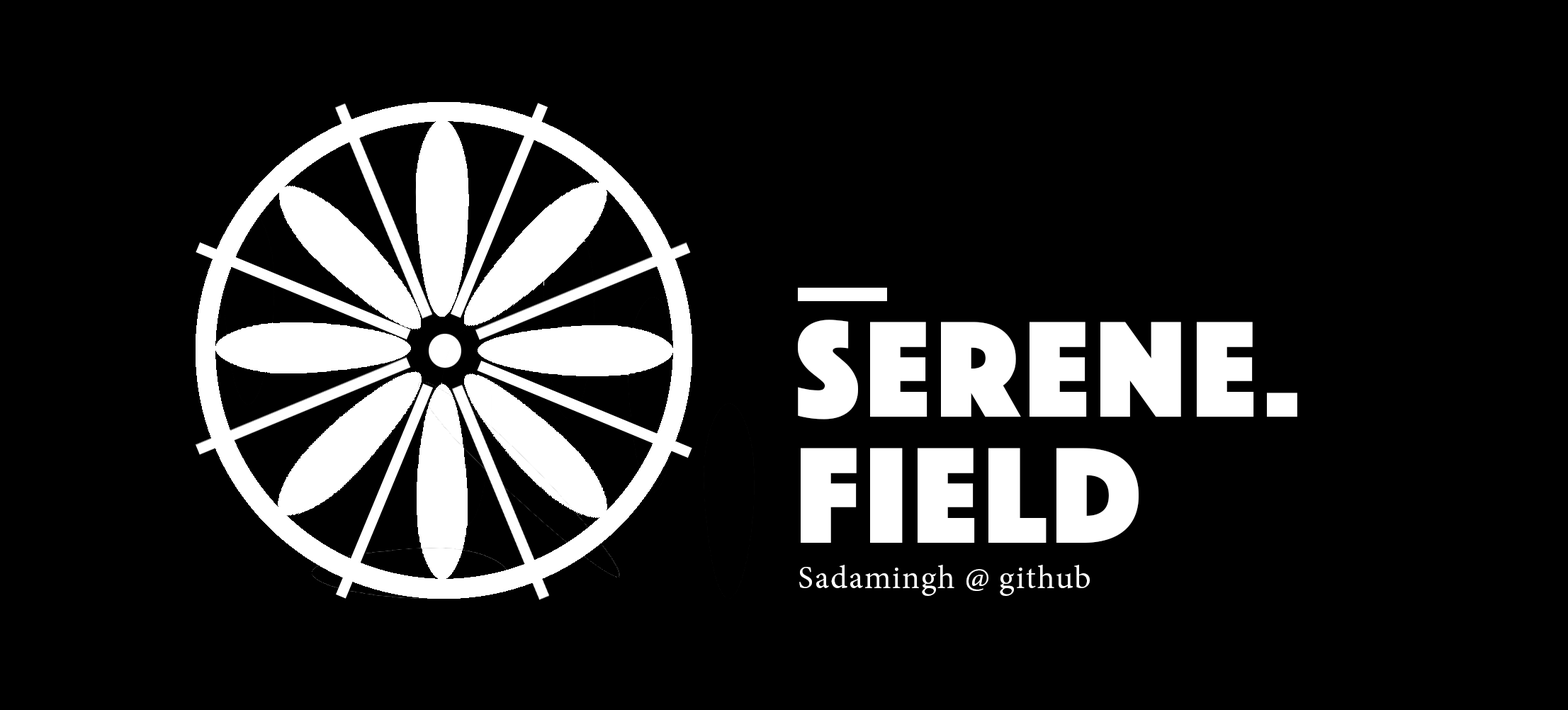
<style>
.page{position:relative;width:1568px;height:710px;background:#000000}
.page>*{position:absolute;margin:0}
.t1{font:141.7px/126.1px "Phosphate-Solid";letter-spacing:0.04em;color:#ffffff}
.t2{font:32.5px "MinionPro-Regular";letter-spacing:0.04em;color:#ffffff}
</style>
<div class="page">
<p class="t1" style="left:798px;top:320px;width:499px;height:223px">Serene.<br>Field</p>
<p class="t2" style="left:799px;top:565px;width:291px;height:31px">Sadamingh @ github</p>
</div>
